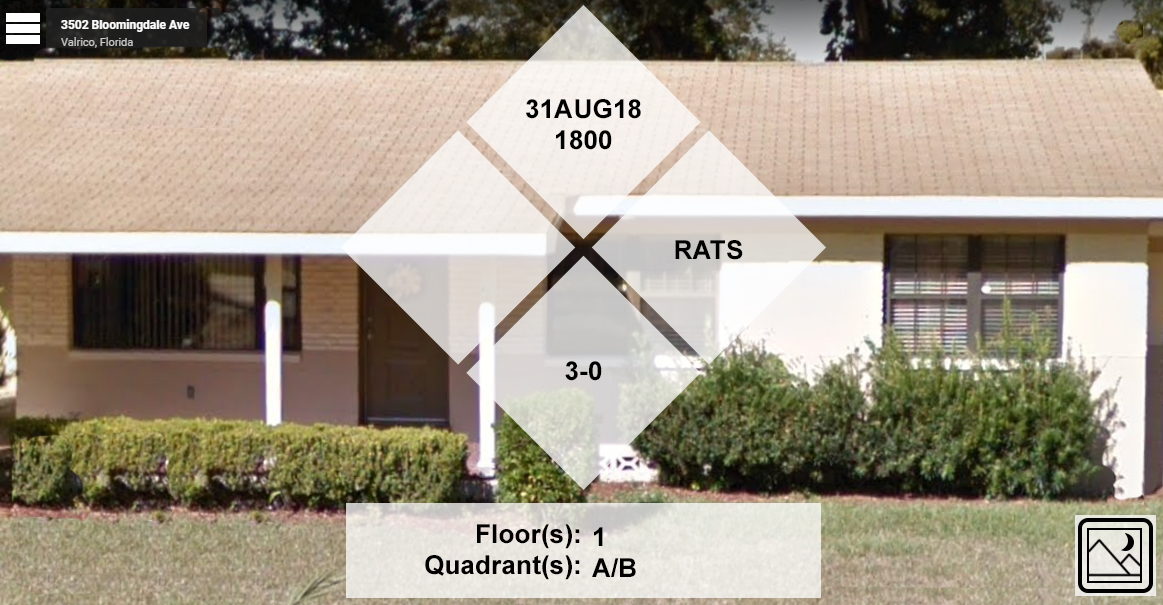
<style>
.page{position:relative;width:1163px;height:605px}
.page>*{position:absolute;margin:0}
.t1{font:26.4px "Arial-BoldMT";color:#000000}
</style>
<div class="page">
<p class="t1" style="left:526px;top:99px;width:115px;height:51px;text-align:center">31AUG18<br>1800</p>
<p class="t1" style="left:675px;top:240px;width:68px;height:20px">RATS</p>
<p class="t1" style="left:565px;top:361px;width:37px;height:20px">3-0</p>
<p class="t1" style="left:425px;top:524px;width:155px;height:56px;text-align:right">Floor(s):<br>Quadrant(s):</p>
<p class="t1" style="left:592px;top:527px;width:44px;height:50px">1<br>A/B</p>
</div>
